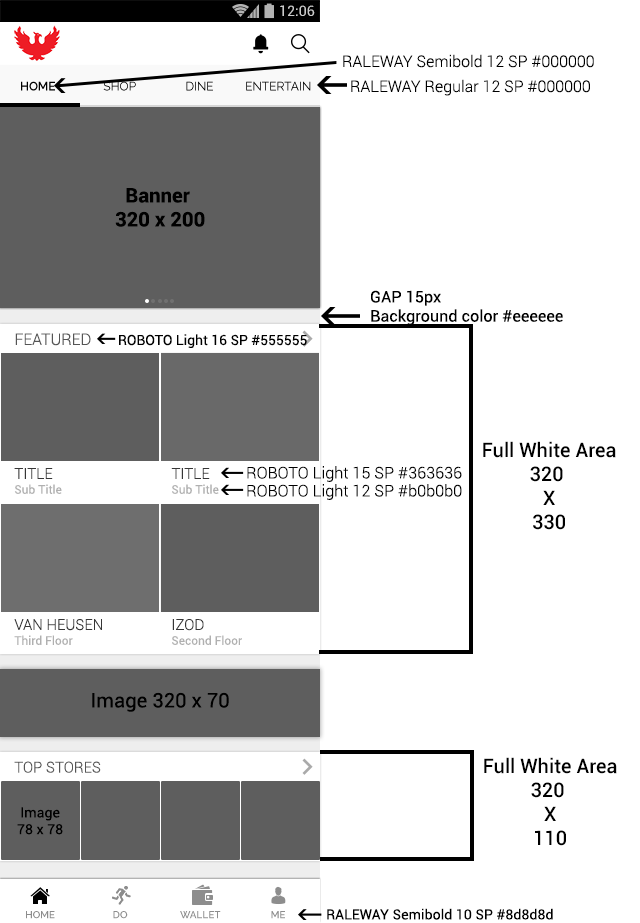
<style>
.page{position:relative;width:640px;height:923px;background:#ffffff}
.page>*{position:absolute;margin:0}
.t1{font:14.2px "Roboto-Regular";color:#cbcbcb}
.t2{font:16px "Roboto-Light";color:#000000}
.t3{font:12px "Raleway-SemiBold";color:#000000}
.t4{font:12px "Raleway-Regular"}
.t5{font:12px "Raleway-Regular";color:#000000}
.t6{font:20px "Roboto-Bold";color:#000000}
.t7{font:16px "Roboto-Regular";color:#000000}
.t8{font:16px "Roboto-Light";color:#555555}
.t9{font:14px "Roboto-Regular";color:#000000}
.t10{font:20px "Roboto-Medium";color:#000000}
.t11{font:15px "Roboto-Light";color:#363636}
.t12{font:12px "Roboto-Regular";color:#b0b0b0}
.t13{font:20px "Roboto-Regular";color:#000000}
.t14{font:15px "Roboto-Light";color:#555555}
.t15{font:10px "Raleway-SemiBold";color:#8d8d8d}
</style>
<div class="page">
<p class="t1" style="left:280px;top:5px;width:35px;height:11px">12:06</p>
<p class="t2" style="left:343px;top:54px;width:251px;height:14px">RALEWAY Semibold 12 SP #000000</p>
<p class="t3" style="left:21px;top:81px;width:34px;height:10px">HOME</p>
<p class="t4" style="left:103px;top:81px;width:33px;height:10px">SHOP</p>
<p class="t5" style="left:186px;top:81px;width:27px;height:10px">DINE</p>
<p class="t5" style="left:246px;top:81px;width:65px;height:10px">ENTERTAIN</p>
<p class="t2" style="left:351px;top:79px;width:239px;height:17px">RALEWAY Regular 12 SP #000000</p>
<p class="t6" style="left:115px;top:188px;width:90px;height:39px;text-align:center">Banner <br>320 x 200</p>
<p class="t7" style="left:371px;top:290px;width:192px;height:36px">GAP 15px<br>Background color #eeeeee</p>
<p class="t8" style="left:15px;top:333px;width:76px;height:13px">FEATURED</p>
<p class="t9" style="left:119px;top:334px;width:188px;height:14px">ROBOTO Light 16 SP #555555</p>
<p class="t10" style="left:483px;top:441px;width:133px;height:89px;text-align:center">Full White Area<br>320 <br>X<br>330</p>
<p class="t11" style="left:14px;top:468px;width:39px;height:11px">TITLE</p>
<p class="t11" style="left:171px;top:468px;width:39px;height:11px">TITLE</p>
<p class="t2" style="left:247px;top:466px;width:215px;height:16px">ROBOTO Light 15 SP #363636</p>
<p class="t12" style="left:14px;top:484px;width:48px;height:10px">Sub Title</p>
<p class="t12" style="left:172px;top:484px;width:47px;height:10px">Sub Title</p>
<p class="t2" style="left:247px;top:484px;width:215px;height:16px">ROBOTO Light 12 SP #b0b0b0</p>
<p class="t11" style="left:14px;top:619px;width:88px;height:12px">VAN HEUSEN</p>
<p class="t11" style="left:172px;top:619px;width:32px;height:12px">IZOD</p>
<p class="t12" style="left:14px;top:635px;width:59px;height:10px">Third Floor</p>
<p class="t12" style="left:172px;top:635px;width:70px;height:10px">Second Floor</p>
<p class="t13" style="left:92px;top:692px;width:137px;height:20px">Image 320 x 70</p>
<p class="t14" style="left:14px;top:761px;width:87px;height:12px">TOP STORES</p>
<p class="t10" style="left:484px;top:757px;width:133px;height:89px;text-align:center">Full White Area<br>320 <br>X<br>110</p>
<p class="t9" style="left:17px;top:807px;width:46px;height:28px;text-align:center">Image<br>78 x 78</p>
<p class="t15" style="left:26px;top:911px;width:29px;height:8px">HOME</p>
<p class="t15" style="left:113px;top:911px;width:15px;height:8px">DO</p>
<p class="t15" style="left:180px;top:911px;width:41px;height:8px">WALLET</p>
<p class="t15" style="left:271px;top:911px;width:14px;height:8px">ME</p>
<p class="t9" style="left:327px;top:908px;width:226px;height:12px">RALEWAY Semibold 10 SP #8d8d8d</p>
</div>
